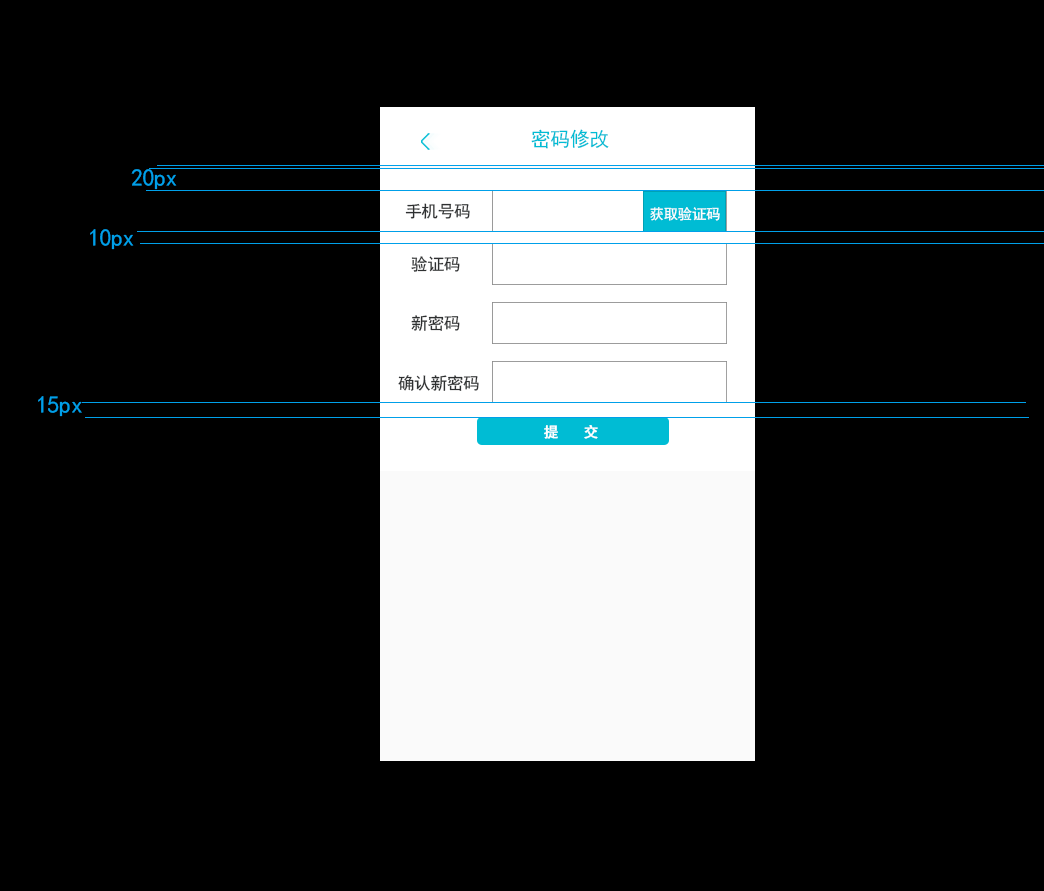
<style>
.page{position:relative;width:1044px;height:891px;background:#000000}
.page>*{position:absolute;margin:0}
.t1{font:20px "SimHei";letter-spacing:-0.02em;color:#00bcd4}
.t2{font:24px "SimHei";letter-spacing:-0.02em;color:#00a0e9}
.t3{font:16.7px "SimHei";letter-spacing:-0.02em;color:#2e3031}
.t4{font:14.4px "SimHei";letter-spacing:-0.02em;color:#ffffff}
.t5{font:14.4px "SimHei";letter-spacing:0.02em;color:#ffffff;font-weight:bold}
</style>
<div class="page">
<p class="t1" style="left:531px;top:129px;width:78px;height:20px">密码修改</p>
<p class="t2" style="left:131px;top:169px;width:46px;height:21px">20px</p>
<p class="t3" style="left:405px;top:203px;width:65px;height:16px">手机号码</p>
<p class="t4" style="left:650px;top:207px;width:70px;height:14px">获取验证码</p>
<p class="t2" style="left:90px;top:229px;width:44px;height:21px">10px</p>
<p class="t3" style="left:411px;top:256px;width:49px;height:16px">验证码</p>
<p class="t3" style="left:411px;top:315px;width:49px;height:16px">新密码</p>
<p class="t3" style="left:398px;top:375px;width:81px;height:16px">确认新密码</p>
<p class="t2" style="left:38px;top:396px;width:44px;height:21px">15px</p>
<p class="t5" style="left:544px;top:425px;width:54px;height:14px">提  交</p>
</div>
